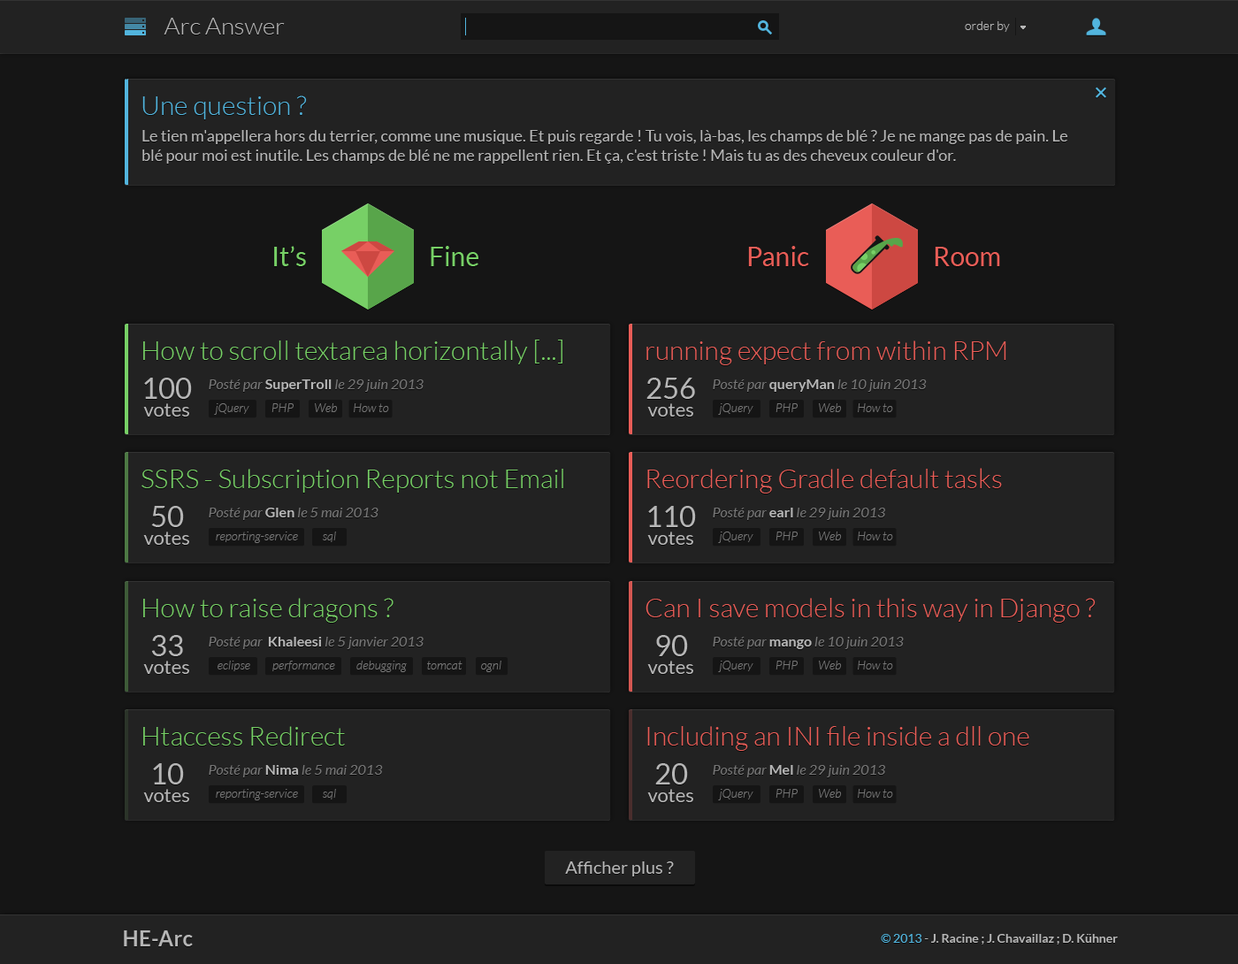
<style>
.page{position:relative;width:1238px;height:964px;background:#222222}
.page>*{position:absolute;margin:0}
.t1{font:23.9px "Lato-Light";color:#b6b6b6}
.t2{font:12.4px "Lato-Light";color:#b6b6b6}
.t3{font:26.5px "Lato-Light";color:#52b5de}
.t4{font:15.9px "Lato-Regular";color:#b6b6b6}
.t5{font:26.5px "Lato-Regular";color:#77d066}
.t6{font:26.5px "Lato-Regular";color:#e95d57}
.t7{font:26.5px "Lato-Light";color:#77d066}
.t8{font:26.5px "Lato-Light";color:#e95d57}
.t9{font:19.4px/17.7px "Lato-Regular";color:#b6b6b6}
.t10{font:29.1px "Lato-Regular";color:#b6b6b6}
.t11{font:14.1px "Lato-Italic";color:#767676}
.t12{font:14.1px "Lato-Bold";color:#b6b6b6}
.t13{font:12.4px "Lato-LightItalic";color:#767676}
.t14{font:17.7px "Lato-Regular";color:#b6b6b6}
.t15{font:21.2px "Lato-Bold";color:#b6b6b6}
.t16{font:12.4px "Lato-Bold";color:#b6b6b6}
.t17{font:12.4px "Lato-Regular";color:#52b5de}
.t18{font:12.4px "Lato-Regular";color:#b6b6b6}
</style>
<div class="page">
<p class="t1" style="left:164px;top:18px;width:121px;height:16px">Arc Answer</p>
<p class="t2" style="left:964px;top:21px;width:45px;height:11px">order by</p>
<p class="t3" style="left:142px;top:95px;width:165px;height:24px">Une question ?</p>
<p class="t4" style="left:142px;top:130px;width:926px;height:34px">Le tien m'appellera hors du terrier, comme une musique. Et puis regarde ! Tu vois, là-bas, les champs de blé ? Je ne mange pas de pain. Le blé pour moi est inutile. Les champs de blé ne me rappellent rien. Et ça, c'est triste ! Mais tu as des cheveux couleur d'or.</p>
<p class="t5" style="left:274px;top:246px;width:32px;height:20px">It’s</p>
<p class="t5" style="left:430px;top:246px;width:48px;height:20px">Fine</p>
<p class="t6" style="left:748px;top:246px;width:61px;height:20px">Panic</p>
<p class="t6" style="left:934px;top:247px;width:66px;height:19px">Room</p>
<p class="t7" style="left:143px;top:339px;width:419px;height:25px">How to scroll textarea horizontally [...]</p>
<p class="t8" style="left:646px;top:340px;width:360px;height:25px">running expect from within RPM</p>
<p class="t9" style="left:143px;top:377px;width:49px;height:39px;text-align:center"><span class="t10">100<br></span>votes</p>
<p class="t9" style="left:646px;top:377px;width:49px;height:39px;text-align:center"><span class="t10">256<br></span>votes</p>
<p class="t11" style="left:209px;top:379px;width:214px;height:13px">Posté par <span class="t12">SuperTroll</span> le 29 juin 2013</p>
<p class="t11" style="left:712px;top:379px;width:214px;height:13px">Posté par <span class="t12">queryMan </span>le 10 juin 2013</p>
<p class="t13" style="left:214px;top:403px;width:35px;height:12px">jQuery</p>
<p class="t13" style="left:271px;top:403px;width:22px;height:9px">PHP</p>
<p class="t13" style="left:315px;top:403px;width:23px;height:9px">Web</p>
<p class="t13" style="left:354px;top:403px;width:35px;height:9px">How to</p>
<p class="t13" style="left:718px;top:403px;width:35px;height:12px">jQuery</p>
<p class="t13" style="left:775px;top:403px;width:22px;height:9px">PHP</p>
<p class="t13" style="left:819px;top:403px;width:23px;height:9px">Web</p>
<p class="t13" style="left:857px;top:403px;width:36px;height:9px">How to</p>
<p class="t7" style="left:141px;top:469px;width:422px;height:23px">SSRS - Subscription Reports not Email</p>
<p class="t8" style="left:647px;top:468px;width:355px;height:25px">Reordering Gradle default tasks</p>
<p class="t9" style="left:143px;top:506px;width:46px;height:39px;text-align:center"><span class="t10">50<br></span>votes</p>
<p class="t11" style="left:209px;top:507px;width:169px;height:13px">Posté par <span class="t12">Glen </span>le 5 mai 2013</p>
<p class="t9" style="left:647px;top:506px;width:49px;height:39px;text-align:center"><span class="t10">110<br></span>votes</p>
<p class="t11" style="left:712px;top:507px;width:173px;height:13px">Posté par <span class="t12">earl</span> le 29 juin 2013</p>
<p class="t13" style="left:216px;top:531px;width:82px;height:12px">reporting-service</p>
<p class="t13" style="left:322px;top:531px;width:14px;height:11px">sql</p>
<p class="t13" style="left:718px;top:531px;width:35px;height:12px">jQuery</p>
<p class="t13" style="left:775px;top:531px;width:22px;height:9px">PHP</p>
<p class="t13" style="left:819px;top:531px;width:23px;height:9px">Web</p>
<p class="t13" style="left:857px;top:531px;width:36px;height:9px">How to</p>
<p class="t7" style="left:143px;top:598px;width:250px;height:24px">How to raise dragons ?</p>
<p class="t8" style="left:645px;top:598px;width:450px;height:24px">Can I save models in this way in Django ?</p>
<p class="t9" style="left:143px;top:635px;width:46px;height:39px;text-align:center"><span class="t10">33<br></span>votes</p>
<p class="t11" style="left:209px;top:636px;width:214px;height:13px">Posté par <span class="t12"> Khaleesi </span>le 5 janvier 2013</p>
<p class="t9" style="left:647px;top:635px;width:46px;height:39px;text-align:center"><span class="t10">90<br></span>votes</p>
<p class="t11" style="left:712px;top:636px;width:191px;height:13px">Posté par <span class="t12">mango </span>le 10 juin 2013</p>
<p class="t13" style="left:217px;top:660px;width:33px;height:11px">eclipse</p>
<p class="t13" style="left:272px;top:660px;width:63px;height:11px">performance</p>
<p class="t13" style="left:356px;top:660px;width:51px;height:12px">debugging</p>
<p class="t13" style="left:427px;top:660px;width:35px;height:9px">tomcat</p>
<p class="t13" style="left:481px;top:660px;width:20px;height:12px">ognl</p>
<p class="t13" style="left:718px;top:660px;width:35px;height:12px">jQuery</p>
<p class="t13" style="left:775px;top:660px;width:22px;height:9px">PHP</p>
<p class="t13" style="left:819px;top:660px;width:23px;height:9px">Web</p>
<p class="t13" style="left:857px;top:660px;width:36px;height:9px">How to</p>
<p class="t7" style="left:143px;top:726px;width:202px;height:19px">Htaccess Redirect</p>
<p class="t8" style="left:647px;top:726px;width:382px;height:24px">Including an INI file inside a dll one</p>
<p class="t9" style="left:143px;top:763px;width:46px;height:39px;text-align:center"><span class="t10">10<br></span>votes</p>
<p class="t11" style="left:209px;top:765px;width:174px;height:12px">Posté par <span class="t12">Nima </span>le 5 mai 2013</p>
<p class="t9" style="left:647px;top:763px;width:46px;height:39px;text-align:center"><span class="t10">20<br></span>votes</p>
<p class="t11" style="left:712px;top:765px;width:173px;height:12px">Posté par <span class="t12">Mel </span>le 29 juin 2013</p>
<p class="t13" style="left:216px;top:789px;width:82px;height:11px">reporting-service</p>
<p class="t13" style="left:322px;top:789px;width:14px;height:10px">sql</p>
<p class="t13" style="left:718px;top:789px;width:35px;height:11px">jQuery</p>
<p class="t13" style="left:775px;top:789px;width:22px;height:8px">PHP</p>
<p class="t13" style="left:819px;top:789px;width:23px;height:8px">Web</p>
<p class="t13" style="left:857px;top:789px;width:36px;height:8px">How to</p>
<p class="t14" style="left:565px;top:861px;width:109px;height:15px">Afficher plus ?</p>
<p class="t15" style="left:124px;top:930px;width:69px;height:16px">HE-Arc</p>
<p class="t16" style="left:880px;top:933px;width:237px;height:11px"><span class="t17">© 2013 </span><span class="t18">- </span>J. Racine ; J. Chavaillaz ; D. Kühner</p>
</div>
